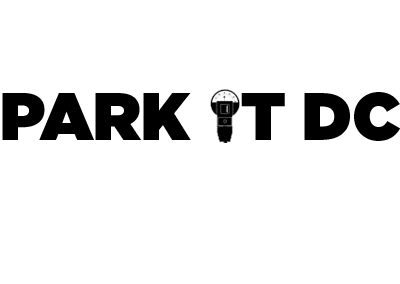
<style>
.page{position:relative;width:400px;height:284px;background:#ffffff}
.page>*{position:absolute;margin:0}
.t1{font:66.7px "GothamHTF-Ultra";color:#000000}
</style>
<div class="page">
<p class="t1" style="left:2px;top:92px;width:399px;height:49px">PARK   T DC</p>
</div>
